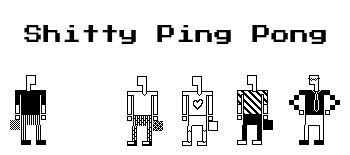
<style>
.page{position:relative;width:350px;height:155px;background:#ffffff}
.page>*{position:absolute;margin:0}
.t1{font:19px "PressStart2P-Regular";color:#000000}
</style>
<div class="page">
<p class="t1" style="left:24px;top:25px;width:302px;height:19px">Shitty Ping Pong</p>
</div>
